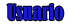
<style>
.page{position:relative;width:70px;height:25px;background:#ffffff}
.page>*{position:absolute;margin:0}
.t1{font:20px "BernardMT-Condensed";color:#1818da}
</style>
<div class="page">
<p class="t1" style="left:7px;top:4px;width:57px;height:17px">Usuario</p>
</div>
